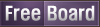
<style>
.page{position:relative;width:100px;height:27px}
.page>*{position:absolute;margin:0}
.t1{font:17px "H2hdrM"}
</style>
<div class="page">
<p class="t1" style="left:5px;top:5px;width:90px;height:16px">Free Board</p>
</div>
